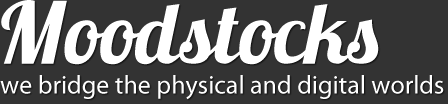
<style>
.page{position:relative;width:448px;height:104px;background:#333333}
.page>*{position:absolute;margin:0}
.t1{font:85.4px "Lobster1.3";color:#ffffff}
.t2{font:26px "MyriadPro-Regular";color:#ffffff}
</style>
<div class="page">
<p class="t1" style="left:1px;top:0px;width:378px;height:65px">Moodstocks</p>
<p class="t2" style="left:0px;top:75px;width:444px;height:25px">we bridge the physical and digital worlds</p>
</div>
